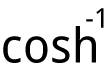
<style>
.page{position:relative;width:105px;height:83px;background:#ffffff}
.page>*{position:absolute;margin:0}
.t1{font:27.2px "DroidSans";color:#000000}
.t2{font:47.9px "DroidSans";color:#000000}
</style>
<div class="page">
<p class="t1" style="left:86px;top:8px;width:18px;height:20px">-1</p>
<p class="t2" style="left:3px;top:26px;width:93px;height:37px">cosh</p>
</div>
